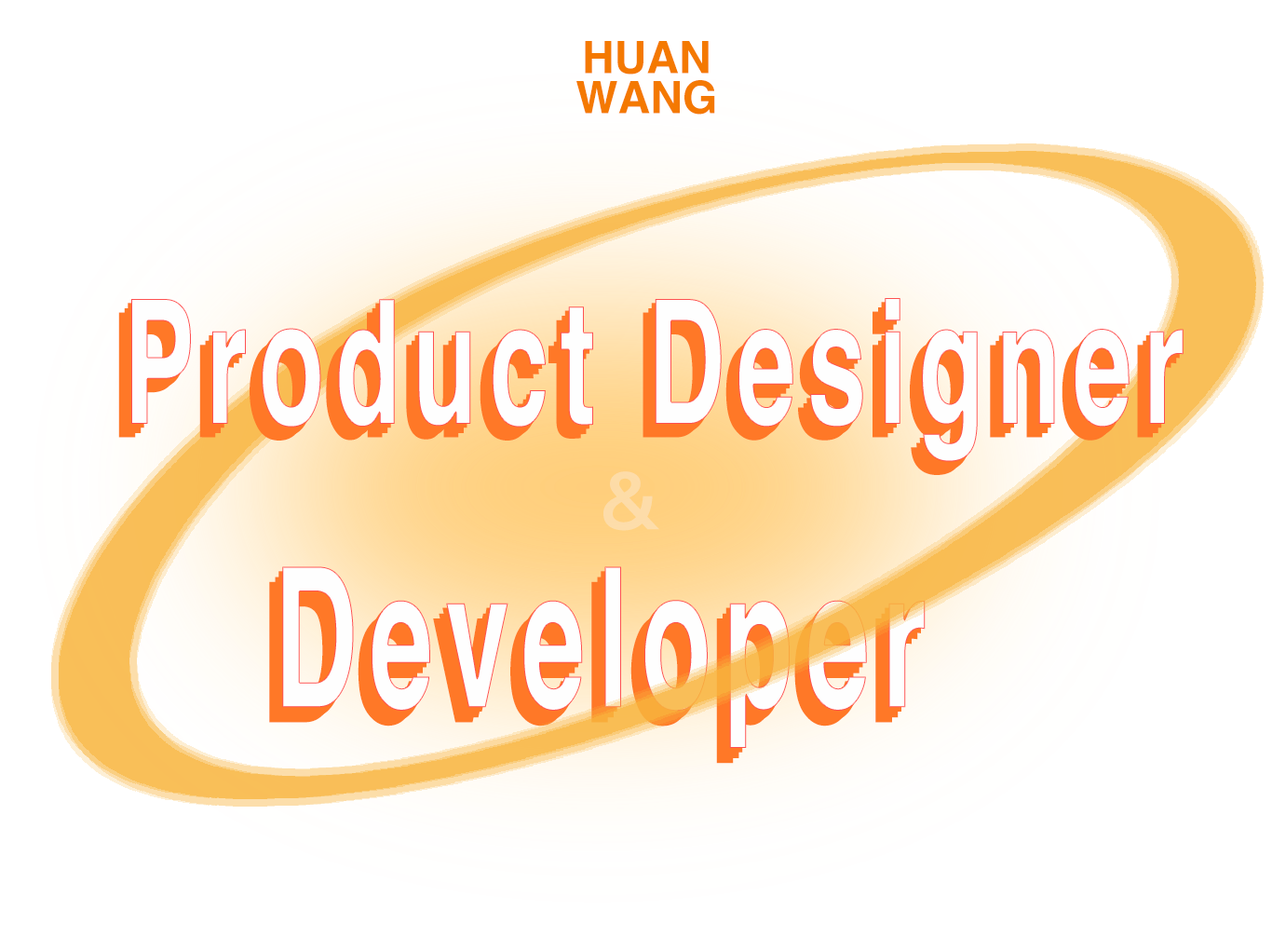
<style>
.page{position:relative;width:1272px;height:937px;background:#ffffff}
.page>*{position:absolute;margin:0}
.t1{font:44.7px/40.1px "Helvetica-Bold";color:#f47901}
.t2{font:173.3px "Helvetica-Bold";letter-spacing:0.1em;color:#fefefe;scale:0.62 1}
.t3{font:173.3px "Helvetica-Bold";letter-spacing:0.1em;color:#ff7827;scale:0.62 1}
.t4{font:79.3px "PingFangSC-Semibold";letter-spacing:0.16em;color:#fddca9}
.t5{font:194.8px "Helvetica-Bold";letter-spacing:0.1em;color:#fefefe;scale:0.59 1}
.t6{font:194.8px "Helvetica-Bold";letter-spacing:0.1em;scale:0.59 1}
</style>
<div class="page">
<p class="t1" style="left:577px;top:41px;width:138px;height:74px;text-align:center">HUAN<br>WANG</p>
<p class="t2" style="left:131px;top:298px;width:1053px;height:164px">Product Designer</p>
<p class="t3" style="left:118px;top:311px;width:1054px;height:164px">Product Designer</p>
<p class="t4" style="left:604px;top:471px;width:56px;height:60px">&amp;</p>
<p class="t5" style="left:282px;top:566px;width:644px;height:182px">Developer</p>
<p class="t6" style="left:269px;top:581px;width:643px;height:183px">Developer</p>
</div>
